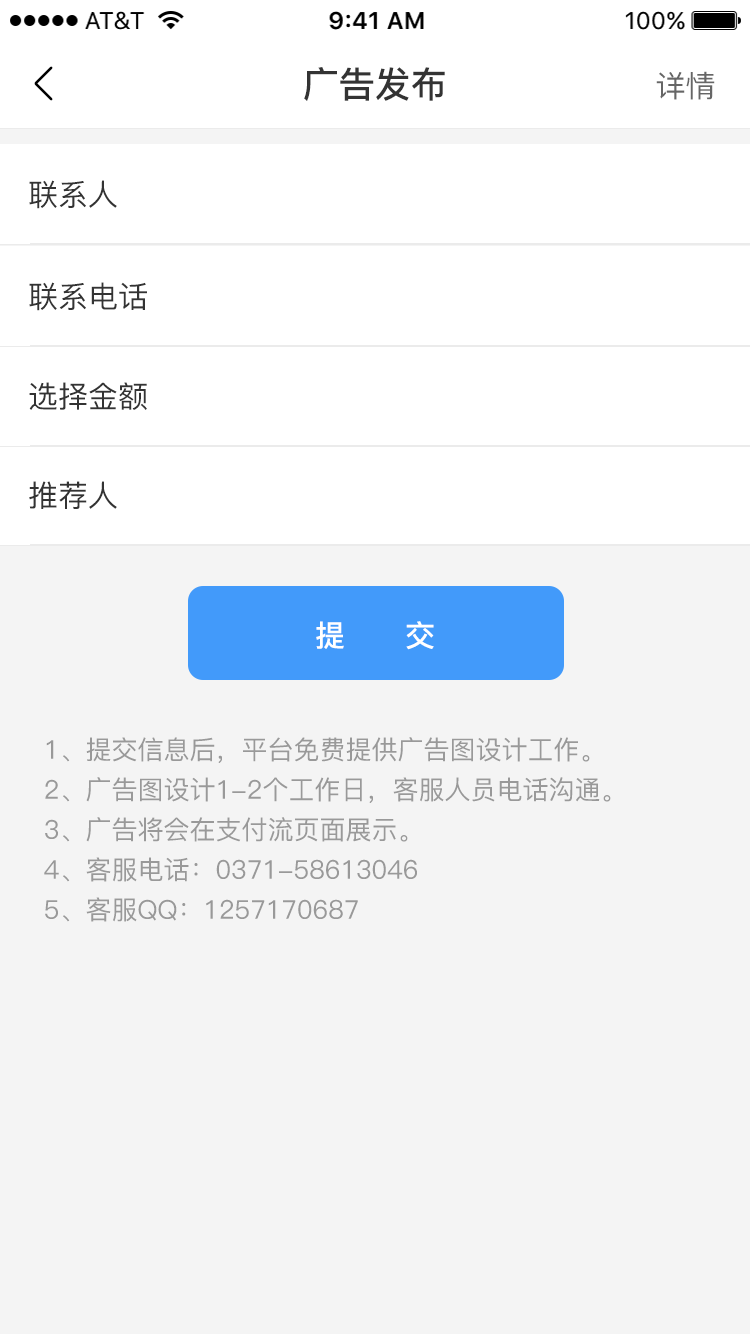
<style>
.page{position:relative;width:750px;height:1334px;background:#f4f4f4}
.page>*{position:absolute;margin:0}
.t1{font:36px "PingFang-SC-Bold";color:#333333}
.t2{font:30px "PingFang-SC-Medium";color:#666666}
.t3{font:30px "PingFang-SC-Medium";color:#333333}
.t4{font:30px "PingFang-SC-Bold";color:#ffffff}
.t5{font:26px/40px "PingFang-SC-Medium";color:#999999}
</style>
<div class="page">
<p class="t1" style="left:304px;top:67px;width:141px;height:34px">广告发布</p>
<p class="t2" style="left:656px;top:71px;width:59px;height:29px">详情</p>
<p class="t3" style="left:29px;top:180px;width:88px;height:29px">联系人</p>
<p class="t3" style="left:29px;top:282px;width:118px;height:29px">联系电话</p>
<p class="t3" style="left:29px;top:382px;width:118px;height:28px">选择金额</p>
<p class="t3" style="left:29px;top:481px;width:88px;height:28px">推荐人</p>
<p class="t4" style="left:316px;top:621px;width:118px;height:29px">提      交</p>
<p class="t5" style="left:44px;top:737px;width:567px;height:185px">1、提交信息后，平台免费提供广告图设计工作。<br>2、广告图设计1-2个工作日，客服人员电话沟通。<br>3、广告将会在支付流页面展示。<br>4、客服电话：0371-58613046<br>5、客服QQ：1257170687</p>
</div>
